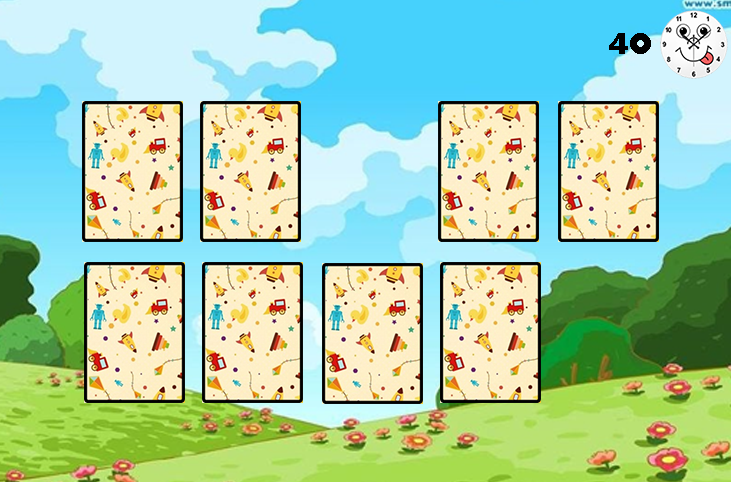
<style>
.page{position:relative;width:731px;height:482px}
.page>*{position:absolute;margin:0}
.t1{font:36px "BerlinSansFBDemi-Bold";color:#000000}
</style>
<div class="page">
<p class="t1" style="left:609px;top:33px;width:42px;height:21px">40</p>
</div>
